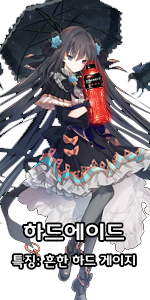
<style>
.page{position:relative;width:150px;height:300px;background:#ffffff}
.page>*{position:absolute;margin:0}
.t1{font:13px "1973MimiWorldR";color:#ffffff}
.t2{font:22.2px "1973MimiWorldB";color:#ffffff}
</style>
<div class="page">
<p class="t1" style="left:12px;top:223px;width:123px;height:45px;text-align:center"><span class="t2">하드에이드<br></span>특징: 흔한 하드 게이지</p>
</div>
